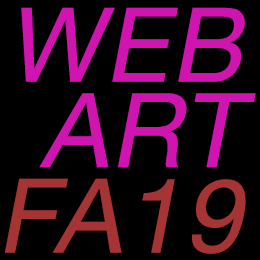
<style>
.page{position:relative;width:260px;height:260px;background:#000000}
.page>*{position:absolute;margin:0}
.t1{font:103px/85.5px "HelveticaNeue";color:#d014af;font-weight:bold;font-style:italic}
.t2{font:103px/85.5px "HelveticaNeue";color:#a53434;font-weight:bold;font-style:italic}
</style>
<div class="page">
<p class="t1" style="left:5px;top:7px;width:251px;height:247px;text-align:right">WEB<br>ART<br><span class="t2">FA19</span></p>
</div>
